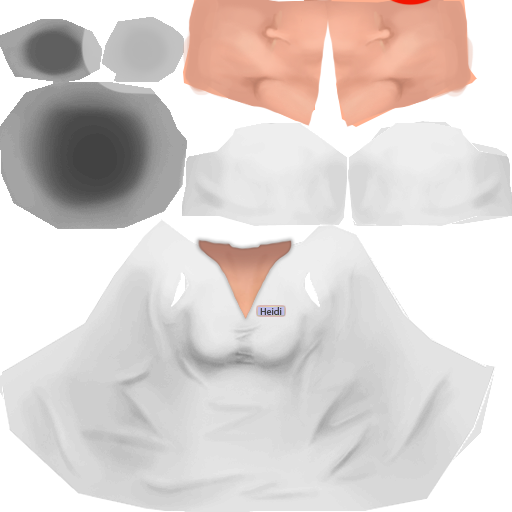
<style>
.page{position:relative;width:512px;height:512px;background:#ffffff}
.page>*{position:absolute;margin:0}
.t1{font:10px "MyriadPro-Regular";color:#444444}
</style>
<div class="page">
<p class="t1" style="left:260px;top:307px;width:22px;height:8px">Heidi</p>
</div>
